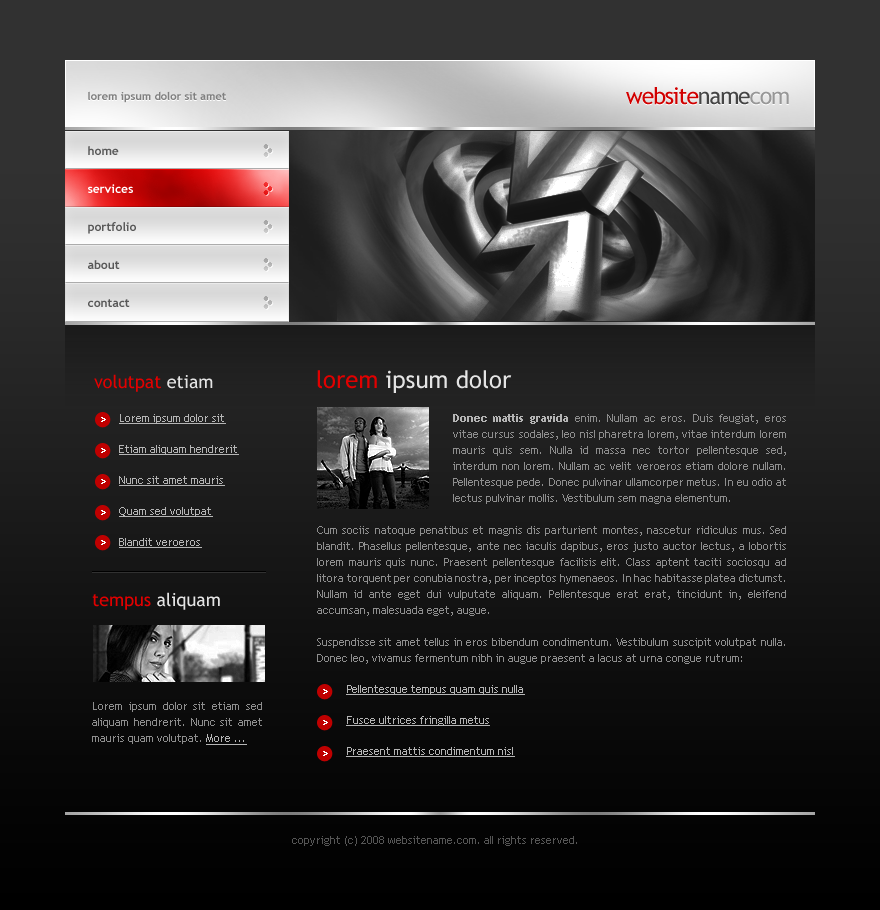
<style>
.page{position:relative;width:880px;height:910px}
.page>*{position:absolute;margin:0}
.t1{font:23px "TrebuchetMS";letter-spacing:-0.05em;color:#d10000}
.t2{font:23px "TrebuchetMS";letter-spacing:-0.05em;color:#454545}
.t3{font:23px "TrebuchetMS";letter-spacing:-0.05em;color:#979797}
.t4{font:11px "TrebuchetMS-Bold";color:#808080}
.t5{font:12px/38px "TrebuchetMS-Bold";color:#595959}
.t6{font:12px/38px "TrebuchetMS-Bold";color:#ffffff}
.t7{font:18px "TrebuchetMS";color:#e10000}
.t8{font:18px "TrebuchetMS";color:#e4e4e4}
.t9{font:24px "TrebuchetMS";color:#e4e4e4}
.t10{font:24px "TrebuchetMS";color:#e10000}
.t11{font:11px/31px "TrebuchetMS";color:#b5b5b5;text-decoration:underline}
.t12{font:11px/16px "TrebuchetMS";color:#8e8e8e}
.t13{font:11px/16px "TrebuchetMS-Bold";color:#b5b5b5}
.t14{font:11px/16px "TrebuchetMS";color:#b5b5b5;text-decoration:underline}
.t15{font:11px "TrebuchetMS";color:#565656}
</style>
<div class="page">
<p class="t1" style="left:626px;top:87px;width:163px;height:18px">website<span class="t2">name</span><span class="t3">com</span></p>
<p class="t4" style="left:88px;top:91px;width:138px;height:12px">lorem ipsum dolor sit amet</p>
<p class="t5" style="left:88px;top:146px;width:48px;height:161px">home<br><span class="t6">services<br></span>portfolio<br>about<br>contact</p>
<p class="t7" style="left:94px;top:374px;width:119px;height:18px">volutpat <span class="t8">etiam</span></p>
<p class="t9" style="left:317px;top:370px;width:195px;height:23px"><span class="t10">lorem </span>ipsum dolor</p>
<p class="t11" style="left:119px;top:414px;width:120px;height:134px">Lorem ipsum dolor sit<br>Etiam aliquam hendrerit<br>Nunc sit amet mauris<br>Quam sed volutpat<br>Blandit veroeros</p>
<p class="t12" style="left:317px;top:414px;width:469px;height:343px;text-align:justify"><span class="t13">Donec mattis gravida</span> enim. Nullam ac eros. Duis feugiat, eros vitae cursus sodales, leo nisl pharetra lorem, vitae interdum lorem mauris quis sem. Nulla id massa nec tortor pellentesque sed, interdum non lorem. Nullam ac velit veroeros etiam dolore nullam. Pellentesque pede. Donec pulvinar ullamcorper metus. In eu odio at lectus pulvinar mollis. Vestibulum sem magna elementum. <br><br>Cum sociis natoque penatibus et magnis dis parturient montes, nascetur ridiculus mus. Sed blandit. Phasellus pellentesque, ante nec iaculis dapibus, eros justo auctor lectus, a lobortis lorem mauris quis nunc. Praesent pellentesque facilisis elit. Class aptent taciti sociosqu ad litora torquent per conubia nostra, per inceptos hymenaeos. In hac habitasse platea dictumst. Nullam id ante eget dui vulputate aliquam. Pellentesque erat erat, tincidunt in, eleifend accumsan, malesuada eget, augue. <br><br>Suspendisse sit amet tellus in eros bibendum condimentum. Vestibulum suscipit volutpat nulla. Donec leo, vivamus fermentum nibh in augue praesent a lacus at urna congue rutrum:<br><span class="t11">Pellentesque tempus quam quis nulla<br>Fusce ultrices fringilla metus<br>Praesent mattis condimentum nisl</span></p>
<p class="t8" style="left:92px;top:592px;width:128px;height:18px"><span class="t7">tempus </span>aliquam</p>
<p class="t12" style="left:92px;top:702px;width:170px;height:43px;text-align:justify">Lorem ipsum dolor sit etiam sed aliquam hendrerit. Nunc sit amet mauris quam volutpat. <span class="t14">More ...</span></p>
<p class="t15" style="left:292px;top:836px;width:285px;height:10px">copyright (c) 2008 websitename.com. all rights reserved.</p>
</div>
